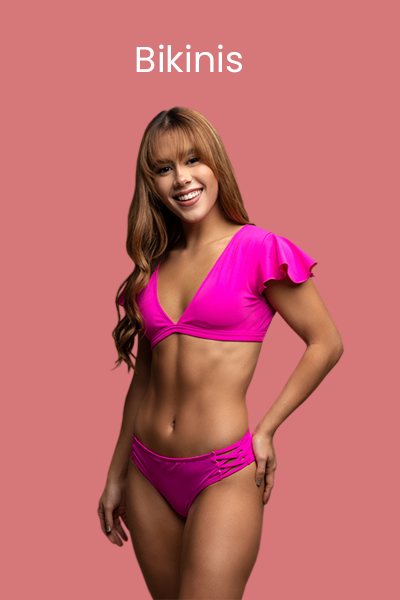
<style>
.page{position:relative;width:400px;height:600px;background:#d67779}
.page>*{position:absolute;margin:0}
.t1{font:36px "Poppins-Regular";color:#ffffff}
</style>
<div class="page">
<p class="t1" style="left:136px;top:44px;width:106px;height:29px">Bikinis</p>
</div>
